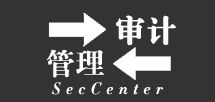
<style>
.page{position:relative;width:215px;height:102px;background:#333333}
.page>*{position:absolute;margin:0}
.t1{font:30px "FZDBSJW--GB1-0";color:#fdfeff;font-weight:bold}
.t2{font:30px "FZDBSJW--GB1-0";color:#fdfeff}
.t3{font:16px "Didot-HTF-B16-Bold-Ital";letter-spacing:0.35em;color:#fdfeff}
</style>
<div class="page">
<p class="t1" style="left:116px;top:15px;width:60px;height:31px">审计</p>
<p class="t2" style="left:46px;top:49px;width:59px;height:29px">管理</p>
<p class="t3" style="left:51px;top:82px;width:113px;height:13px">SecCenter</p>
</div>
